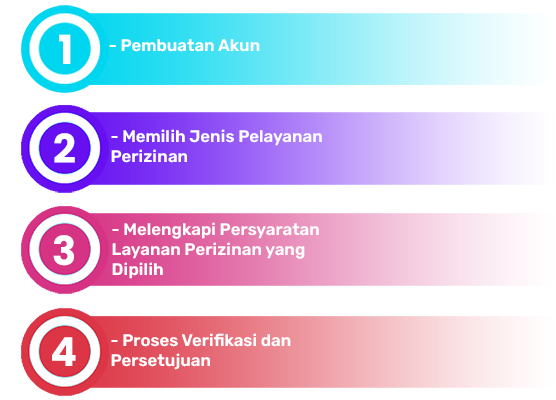
<style>
.page{position:relative;width:556px;height:400px;background:#ffffff}
.page>*{position:absolute;margin:0}
.t1{font:40px "Poppins-Bold";color:#ffffff}
.t2{font:16.7px "Rubik-SemiBold";color:#ffffff}
</style>
<div class="page">
<p class="t1" style="left:59px;top:34px;width:12px;height:30px">1</p>
<p class="t2" style="left:109px;top:39px;width:151px;height:13px">- Pembuatan Akun</p>
<p class="t1" style="left:54px;top:133px;width:21px;height:30px">2</p>
<p class="t2" style="left:111px;top:129px;width:211px;height:34px">- Memilih Jenis Pelayanan<br>Perizinan</p>
<p class="t2" style="left:112px;top:222px;width:207px;height:57px">- Melengkapi Persyaratan<br>Layanan Perizinan yang<br>Dipilih</p>
<p class="t1" style="left:53px;top:235px;width:21px;height:31px">3</p>
<p class="t1" style="left:52px;top:337px;width:24px;height:29px">4</p>
<p class="t2" style="left:111px;top:333px;width:180px;height:37px">- Proses Verifikasi dan<br>Persetujuan</p>
</div>
